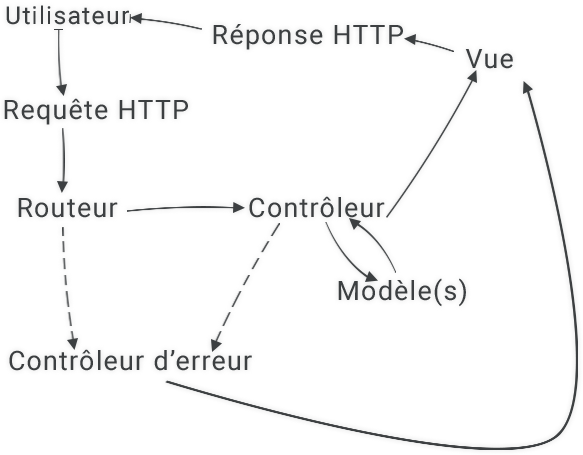
<style>
.page{position:relative;width:583px;height:455px;background:#ffffff}
.page>*{position:absolute;margin:0}
.t1{font:24.8px "Roboto-Regular";letter-spacing:0.05em;color:#3c3f41}
.t2{font:26.7px "Roboto-Regular";letter-spacing:0.05em;color:#3c3f41}
</style>
<div class="page">
<p class="t1" style="left:6px;top:5px;width:123px;height:20px">Utilisateur</p>
<p class="t2" style="left:213px;top:24px;width:190px;height:26px">Réponse HTTP</p>
<p class="t2" style="left:465px;top:49px;width:48px;height:20px">Vue</p>
<p class="t2" style="left:4px;top:98px;width:184px;height:27px">Requête HTTP</p>
<p class="t2" style="left:18px;top:198px;width:100px;height:20px">Routeur</p>
<p class="t2" style="left:249px;top:196px;width:136px;height:22px">Contrôleur</p>
<p class="t2" style="left:338px;top:278px;width:128px;height:29px">Modèle(s)</p>
<p class="t2" style="left:9px;top:349px;width:243px;height:22px">Contrôleur d’erreur</p>
</div>
